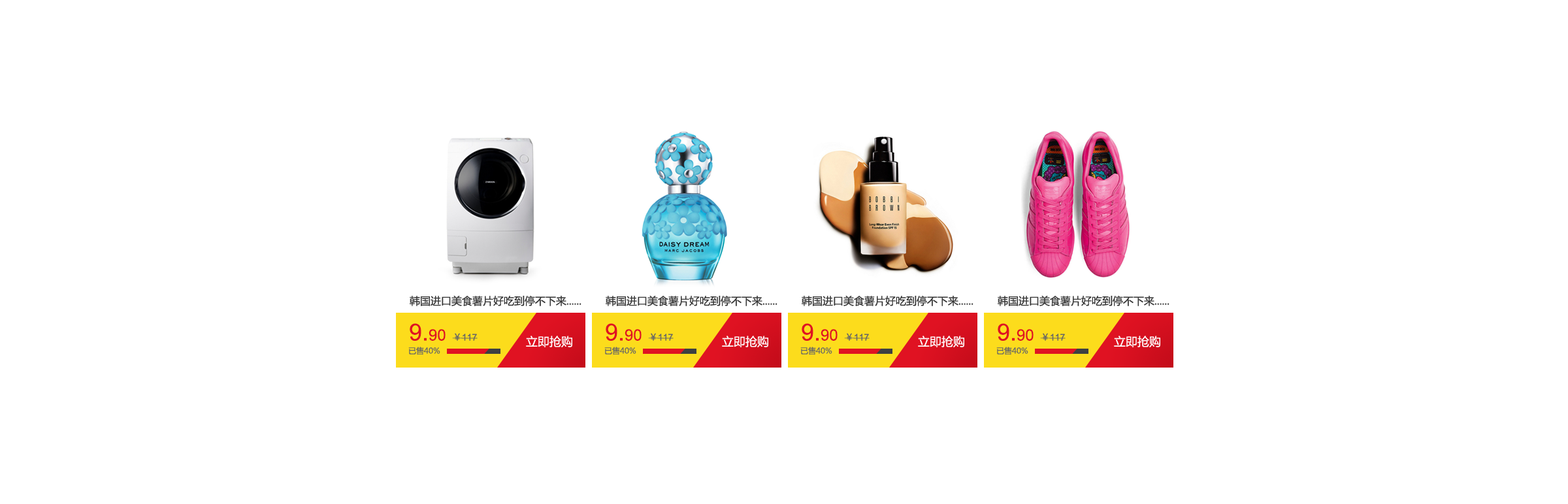
<style>
.page{position:relative;width:1568px;height:504px;background:#ffffff}
.page>*{position:absolute;margin:0}
.t1{font:10.5px "MicrosoftYaHei";color:#333333;text-transform:uppercase}
.t2{font:23.5px "ArialMT";color:#e01222;text-transform:uppercase}
.t3{font:15.7px "ArialMT";color:#e01222;text-transform:uppercase}
.t4{font:9.1px "ArialMT";color:#666666;text-transform:uppercase}
.t5{font:9.1px "MicrosoftYaHei";color:#666666;text-transform:uppercase}
.t6{font:11.8px "MicrosoftYaHei";color:#ffffff;text-transform:uppercase}
.t7{font:7.8px "MicrosoftYaHei";color:#666666;text-transform:uppercase}
</style>
<div class="page">
<p class="t1" style="left:410px;top:296px;width:171px;height:10px">韩国进口美食薯片好吃到停不下来......</p>
<p class="t1" style="left:606px;top:296px;width:171px;height:10px">韩国进口美食薯片好吃到停不下来......</p>
<p class="t1" style="left:802px;top:296px;width:171px;height:10px">韩国进口美食薯片好吃到停不下来......</p>
<p class="t1" style="left:998px;top:296px;width:171px;height:10px">韩国进口美食薯片好吃到停不下来......</p>
<p class="t2" style="left:410px;top:323px;width:36px;height:18px">9.<span class="t3">90</span></p>
<p class="t2" style="left:606px;top:323px;width:36px;height:18px">9.<span class="t3">90</span></p>
<p class="t2" style="left:802px;top:323px;width:36px;height:18px">9.<span class="t3">90</span></p>
<p class="t2" style="left:998px;top:323px;width:36px;height:18px">9.<span class="t3">90</span></p>
<p class="t4" style="left:452px;top:333px;width:26px;height:8px"><span class="t5">￥</span>117</p>
<p class="t6" style="left:526px;top:336px;width:46px;height:12px">立即抢购</p>
<p class="t4" style="left:648px;top:333px;width:26px;height:8px"><span class="t5">￥</span>117</p>
<p class="t6" style="left:722px;top:336px;width:46px;height:12px">立即抢购</p>
<p class="t4" style="left:844px;top:333px;width:26px;height:8px"><span class="t5">￥</span>117</p>
<p class="t6" style="left:918px;top:336px;width:46px;height:12px">立即抢购</p>
<p class="t4" style="left:1040px;top:333px;width:26px;height:8px"><span class="t5">￥</span>117</p>
<p class="t6" style="left:1114px;top:336px;width:46px;height:12px">立即抢购</p>
<p class="t7" style="left:408px;top:347px;width:32px;height:8px">已售40%</p>
<p class="t7" style="left:604px;top:347px;width:32px;height:8px">已售40%</p>
<p class="t7" style="left:800px;top:347px;width:32px;height:8px">已售40%</p>
<p class="t7" style="left:996px;top:347px;width:32px;height:8px">已售40%</p>
</div>
